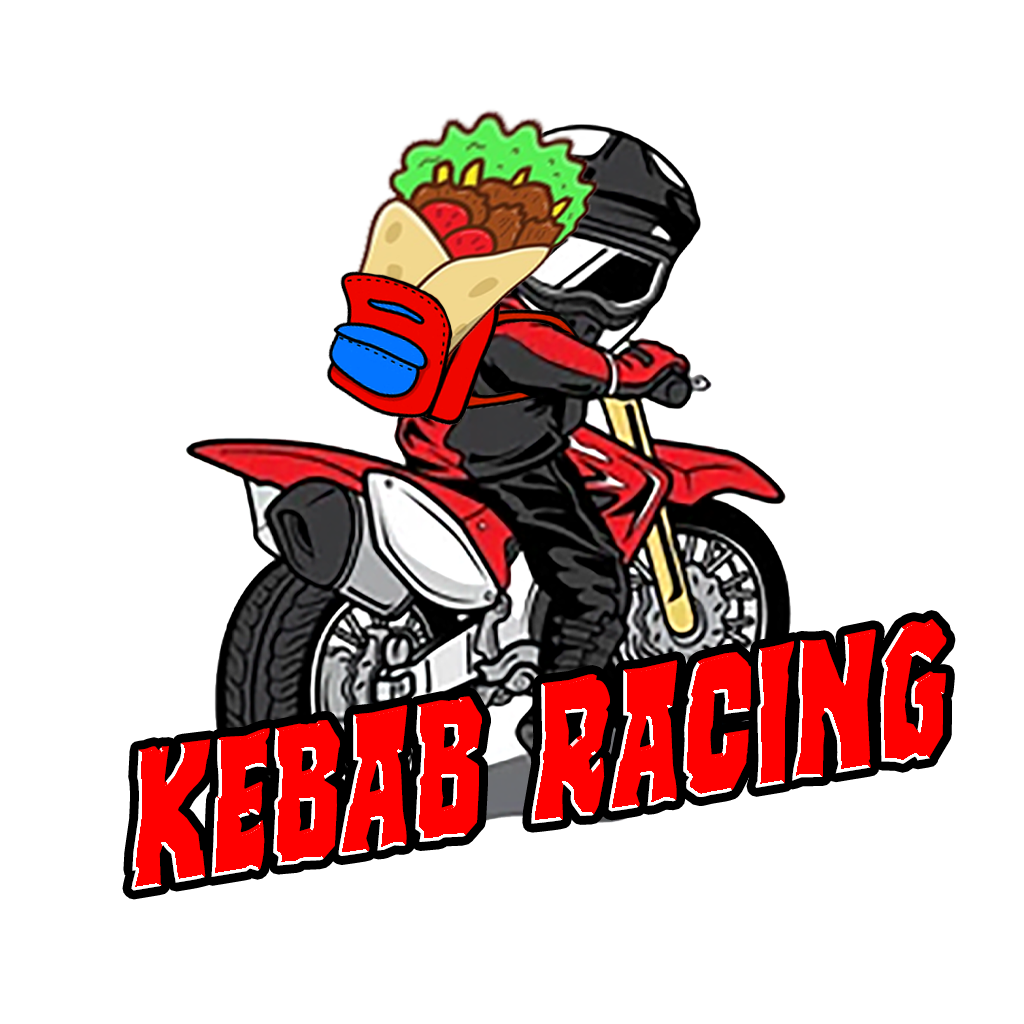
<style>
.page{position:relative;width:1024px;height:1024px;background:#ffffff}
.page>*{position:absolute;margin:0}
.t1{font:203.6px "Freakfinder";color:#ff0000;scale:0.95 1}
</style>
<div class="page">
<p class="t1" style="left:131px;top:619px;width:816px;height:272px;rotate:-9deg">kebab racing</p>
</div>
